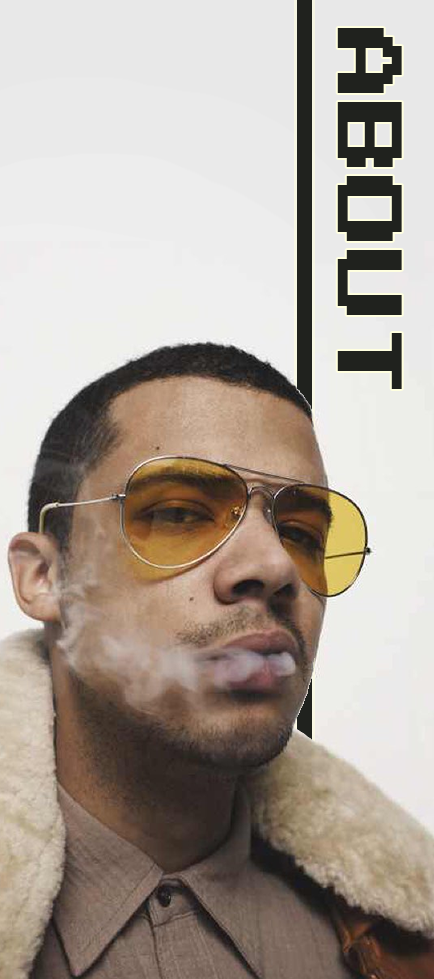
<style>
.page{position:relative;width:434px;height:979px}
.page>*{position:absolute;margin:0}
.t1{font:72px "PressStart2P-Regular";color:#20221e;font-weight:bold}
</style>
<div class="page">
<p class="t1" style="left:337px;top:28px;width:65px;height:361px;rotate:90deg">ABOUT</p>
</div>
